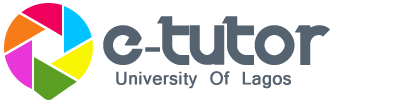
<style>
.page{position:relative;width:398px;height:104px;background:#ffffff}
.page>*{position:absolute;margin:0}
.t1{font:55.8px "Velocity";color:#556270;font-weight:bold}
.t2{font:55.8px "MyriadPro-Regular";color:#556270;font-weight:bold}
.t3{font:19.6px "Latha";color:#556270;font-weight:bold}
</style>
<div class="page">
<p class="t1" style="left:103px;top:16px;width:227px;height:49px">e<span class="t2">-</span>tutor</p>
<p class="t3" style="left:116px;top:71px;width:175px;height:18px">University Of Lagos</p>
</div>
